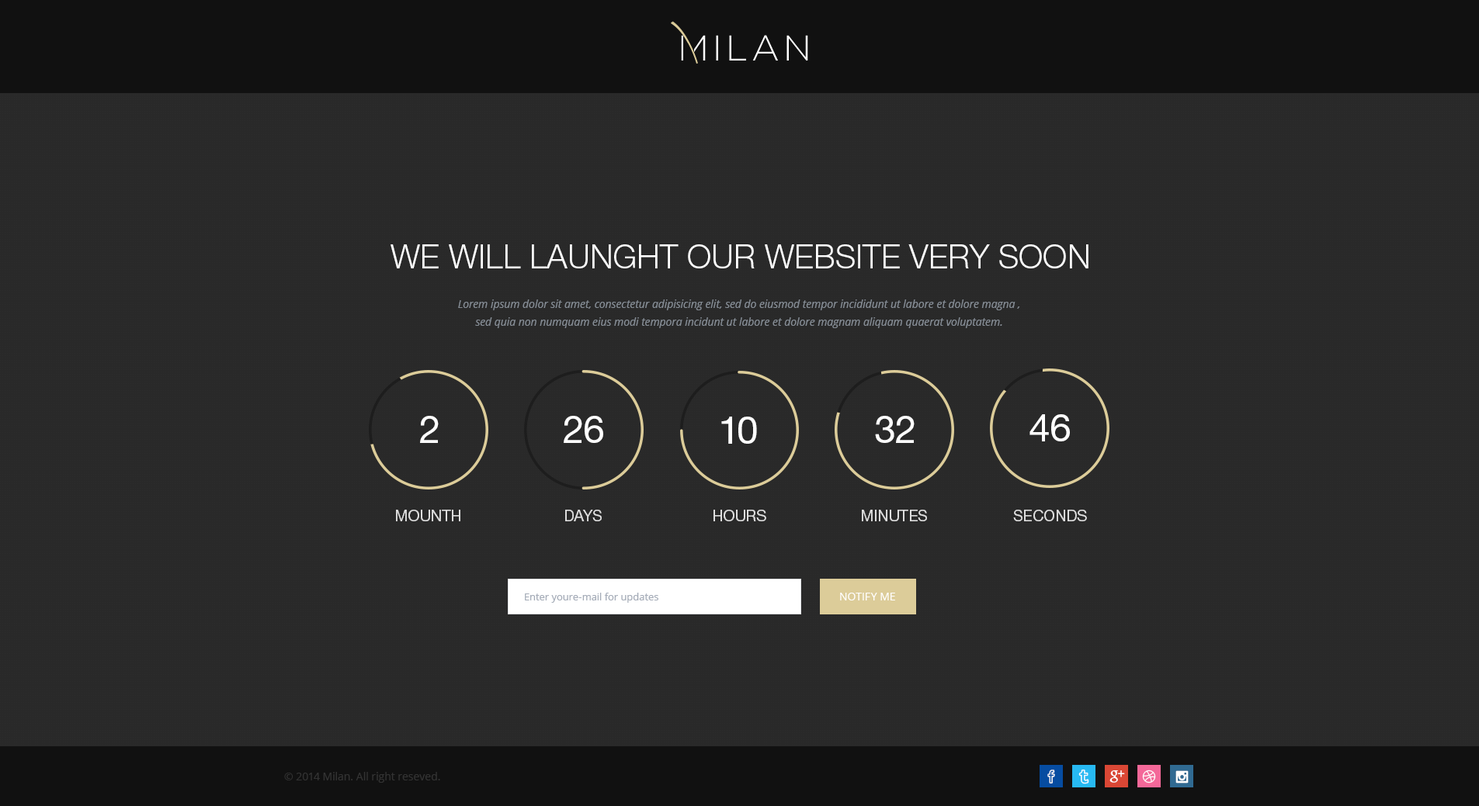
<style>
.page{position:relative;width:1479px;height:806px;background:#292929}
.page>*{position:absolute;margin:0}
.t1{font:32.6px "HelveticaNeueCyr-Light";color:#ffffff}
.t2{font:10.9px/17.9px "OpenSans-Italic";color:#858c94}
.t3{font:38.8px "HelveticaNeueCyr-Roman";color:#ffffff}
.t4{font:15.5px "HelveticaNeueCyr-Roman";color:#dedede}
.t5{font:10.1px "OpenSans";color:#a5acb8}
.t6{font:10.9px "OpenSans";color:#ffffff}
.t7{font:10.9px "OpenSans";color:#333333}
</style>
<div class="page">
<p class="t1" style="left:390px;top:244px;width:698px;height:25px">WE WILL LAUNGHT OUR WEBSITE VERY SOON</p>
<p class="t2" style="left:458px;top:300px;width:562px;height:28px;text-align:center">Lorem ipsum dolor sit amet, consectetur adipisicing elit, sed do eiusmod tempor incididunt ut labore et dolore magna , sed quia non numquam eius modi tempora incidunt ut labore et dolore magnam aliquam quaerat voluptatem.</p>
<p class="t3" style="left:420px;top:416px;width:19px;height:27px">2</p>
<p class="t3" style="left:564px;top:416px;width:39px;height:27px">26</p>
<p class="t3" style="left:721px;top:417px;width:36px;height:27px">10</p>
<p class="t3" style="left:875px;top:416px;width:39px;height:27px">32</p>
<p class="t3" style="left:1029px;top:414px;width:41px;height:28px">46</p>
<p class="t4" style="left:396px;top:510px;width:64px;height:12px">MOUNTH</p>
<p class="t4" style="left:565px;top:510px;width:37px;height:12px">DAYS</p>
<p class="t4" style="left:713px;top:510px;width:53px;height:12px">HOURS</p>
<p class="t4" style="left:862px;top:510px;width:65px;height:12px">MINUTES</p>
<p class="t4" style="left:1013px;top:510px;width:74px;height:12px">SECONDS</p>
<p class="t5" style="left:525px;top:593px;width:133px;height:10px">Enter youre-mail for updates</p>
<p class="t6" style="left:840px;top:593px;width:55px;height:8px">NOTIFY ME</p>
<p class="t7" style="left:284px;top:772px;width:156px;height:11px">© 2014 Milan. All right reseved.</p>
</div>
